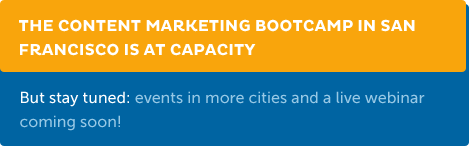
<style>
.page{position:relative;width:469px;height:146px;background:#0064a2}
.page>*{position:absolute;margin:0}
.t1{font:16px/24px "PlutoBold";color:#ffffff;text-transform:uppercase}
.t2{font:16px/24px "MuseoSans-500";color:#97c8e5}
.t3{font:16px/24px "MuseoSans-500";color:#ffffff}
</style>
<div class="page">
<p class="t1" style="left:19px;top:19px;width:396px;height:37px">The Content Marketing Bootcamp in San <br>Francisco is at capacity</p>
<p class="t2" style="left:20px;top:91px;width:405px;height:40px"><span class="t3">But stay tuned:</span> events in more cities and a live webinar coming soon!</p>
</div>
